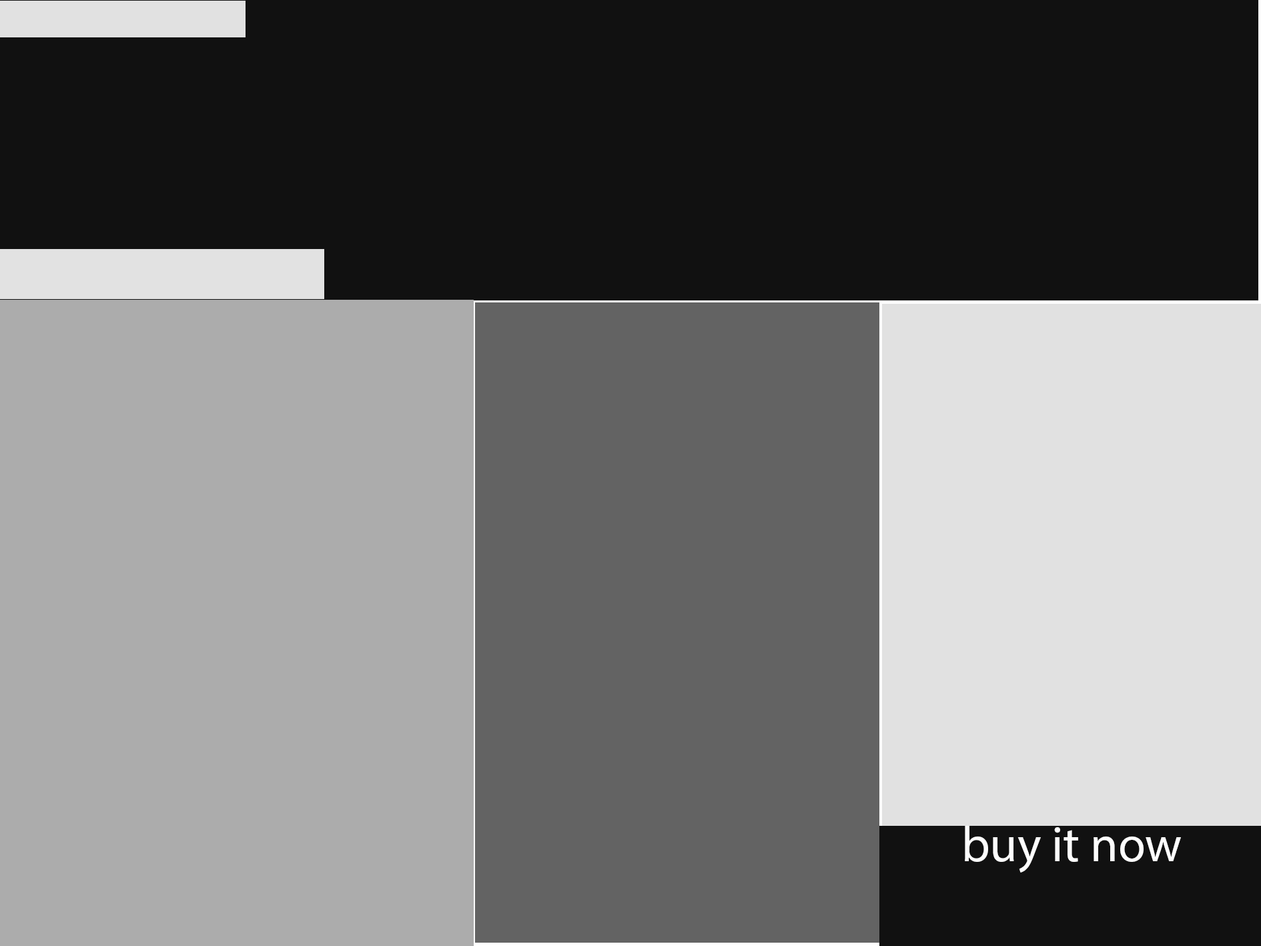
<style>
.page{position:relative;width:1261px;height:946px;background:#111111}
.page>*{position:absolute;margin:0}
.t1{font:50px "MyriadPro-Regular";color:#fefefe}
</style>
<div class="page">
<p class="t1" style="left:965px;top:825px;width:216px;height:47px">buy it now</p>
</div>
